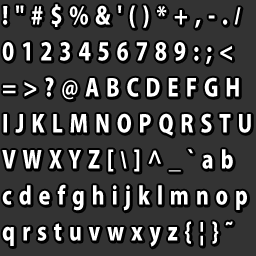
<style>
.page{position:relative;width:256px;height:256px;background:#333333}
.page>*{position:absolute;margin:0}
.t1{font:24px/36px "KozGoPro-Heavy";letter-spacing:0.284em;color:#ffffff;scale:0.88 1}
.t2{font:24px/36px "Arial-BoldMT";letter-spacing:0.284em;color:#ffffff;scale:0.88 1}
.t3{font:24px/36px "KozGoPro-Heavy";letter-spacing:0.284em;scale:0.88 1}
.t4{font:24px/36px "Arial-BoldMT";letter-spacing:0.284em;scale:0.88 1}
</style>
<div class="page">
<p class="t1" style="left:2px;top:4px;width:249px;height:243px">!"#$%&amp;'()*+,-.<span class="t2">/<br></span>0123456789:;&lt;<br>=&gt;?@ABCDEFGH<br>IJKLMNOPQRSTU<br>VWXYZ[<span class="t2">\</span>]^_`ab<br>cdefghijklmnop<br>qrstuvwxyz{|}~</p>
<p class="t3" style="left:3px;top:5px;width:249px;height:243px">!"#$%&amp;'()*+,-.<span class="t4">/<br></span>0123456789:;&lt;<br>=&gt;?@ABCDEFGH<br>IJKLMNOPQRSTU<br>VWXYZ[<span class="t4">\</span>]^_`ab<br>cdefghijklmnop<br>qrstuvwxyz{|}~</p>
</div>
